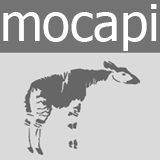
<style>
.page{position:relative;width:160px;height:160px;background:#dadada}
.page>*{position:absolute;margin:0}
.t1{font:50.5px "Tahoma";color:#ffffff}
</style>
<div class="page">
<p class="t1" style="left:3px;top:4px;width:154px;height:47px">mocapi</p>
</div>
